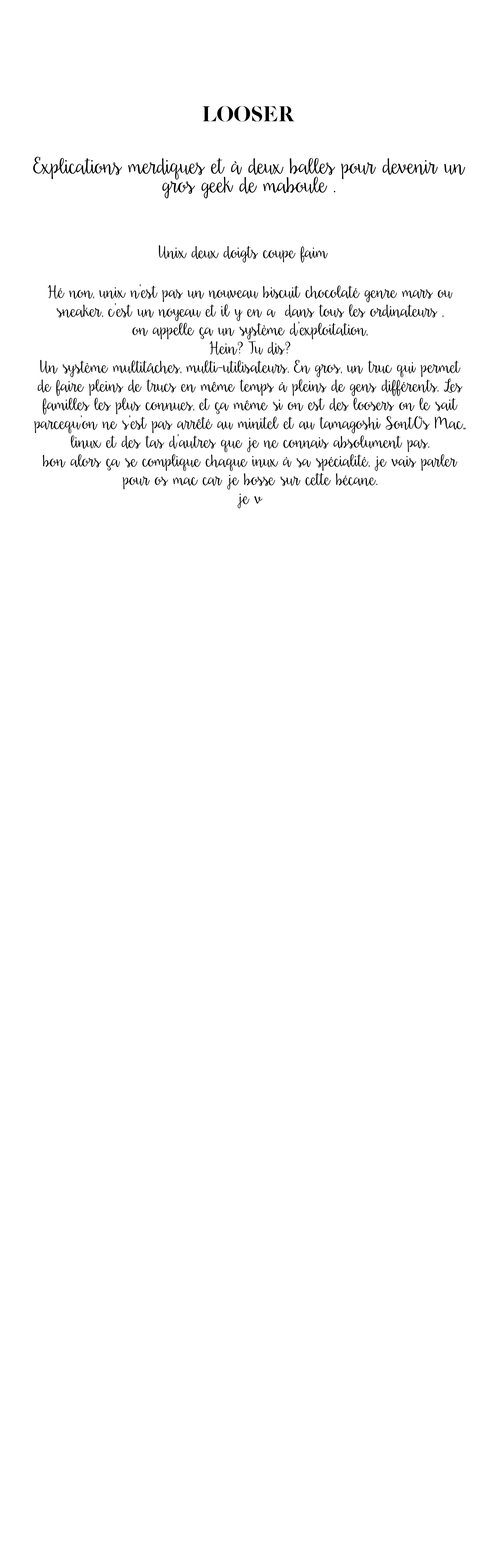
<style>
.page{position:relative;width:502px;height:1568px;background:#ffffff}
.page>*{position:absolute;margin:0}
.t1{font:22.4px "CaslonCP";color:#000000}
.t2{font:22.4px/18.7px "Daydreamer";color:#000000}
.t3{font:17.4px "Daydreamer";color:#000000}
.t4{font:17.4px/18.7px "Daydreamer";color:#000000}
</style>
<div class="page">
<p class="t1" style="left:202px;top:106px;width:92px;height:16px">LOOSER</p>
<p class="t2" style="left:33px;top:157px;width:432px;height:41px;text-align:center">Explications merdiques et à deux balles pour devenir un gros geek de maboule .</p>
<p class="t3" style="left:159px;top:245px;width:169px;height:18px">Unix deux doigts coupe faim</p>
<p class="t4" style="left:34px;top:284px;width:431px;height:224px;text-align:center">Hé non, unix n’est pas un nouveau biscuit chocolaté genre mars ou sneaker, c’est un noyeau et il y en a  dans tous les ordinateurs , <br>on appelle ça un système d’exploitation,    <br>Hein? Tu dis?<br>Un système multitâches, multi-utilisateurs. En gros, un truc qui permet de faire pleins de trucs en même temps à pleins de gens différents. Les familles les plus connues, et ça même si on est des loosers on le sait parcequ’on ne s’est pas arrêté au minitel et au tamagoshi SontOs Mac,, linux et des tas d’autres que je ne connais absolument pas.<br>bon alors ça se complique chaque inux à sa spécialité, je vais parler pour os mac car je bosse sur cette bécane. <br>je v</p>
</div>
